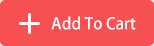
<style>
.page{position:relative;width:154px;height:46px;background:#f65053}
.page>*{position:absolute;margin:0}
.t1{font:15.8px "FZLTZHJW--GB1-0";color:#ffffff;font-weight:bold}
</style>
<div class="page">
<p class="t1" style="left:51px;top:16px;width:85px;height:14px">Add To Cart</p>
</div>
